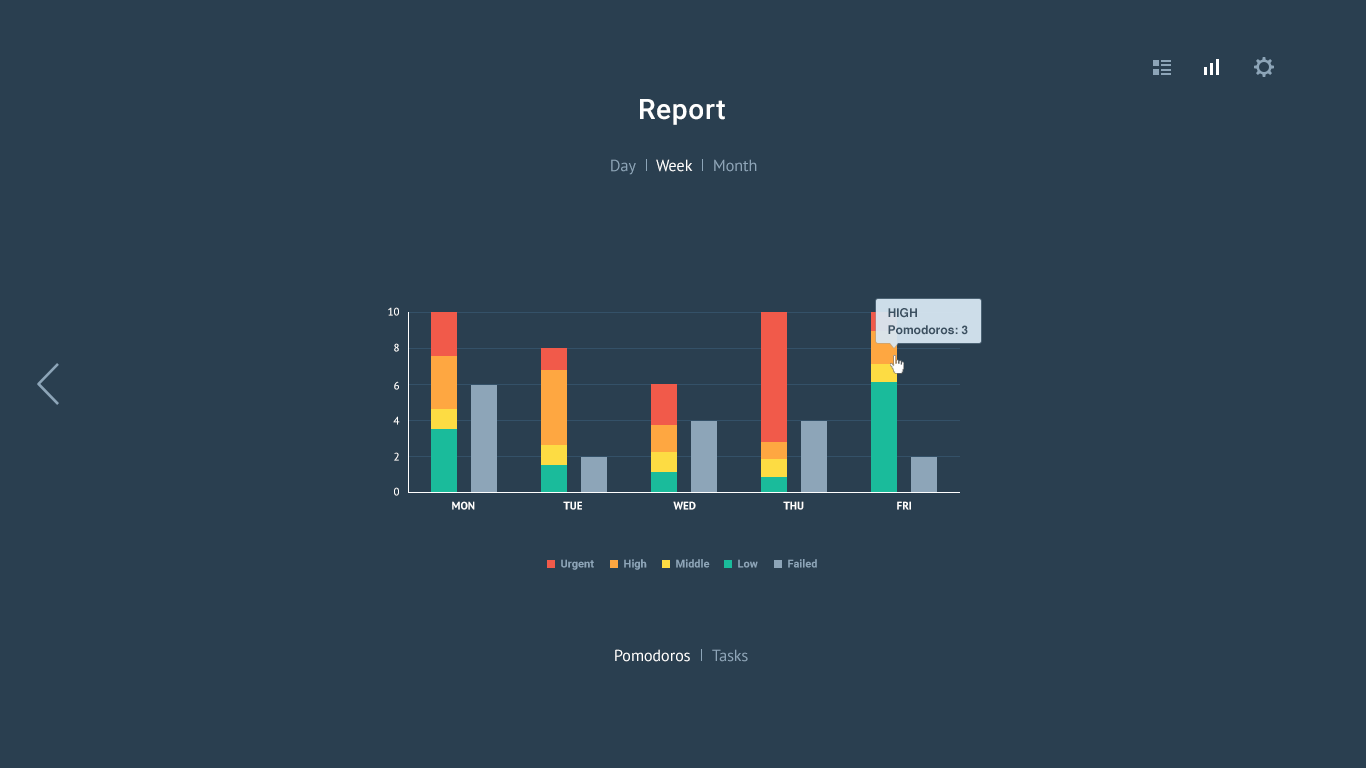
<style>
.page{position:relative;width:1366px;height:768px;background:#2a3f50}
.page>*{position:absolute;margin:0}
.t1{font:28px "Roboto-Medium";letter-spacing:0.025em;color:#ffffff}
.t2{font:16px "PTSans-Regular";color:#8da5b8}
.t3{font:16px "PTSans-Regular";color:#ffffff}
.t4{font:16px "PTSans-Regular";color:#8ea5b8}
.t5{font:11px "PTSans-Regular";color:#ffffff}
.t6{font:12px "Helvetica-Bold";color:#3c5162}
.t7{font:11px "PTSans-Bold";color:#ffffff}
.t8{font:11px "Roboto-Bold";color:#8da5b8}
</style>
<div class="page">
<p class="t1" style="left:640px;top:99px;width:85px;height:26px">Report</p>
<p class="t2" style="left:611px;top:159px;width:25px;height:16px">Day</p>
<p class="t3" style="left:656px;top:159px;width:37px;height:13px">Week</p>
<p class="t4" style="left:714px;top:159px;width:43px;height:13px">Month</p>
<p class="t5" style="left:388px;top:307px;width:11px;height:9px">10</p>
<p class="t6" style="left:888px;top:308px;width:29px;height:10px">HIGH</p>
<p class="t6" style="left:888px;top:325px;width:80px;height:10px">Pomodoros: 3</p>
<p class="t5" style="left:394px;top:343px;width:5px;height:9px">8</p>
<p class="t5" style="left:394px;top:381px;width:5px;height:9px">6</p>
<p class="t5" style="left:393px;top:416px;width:7px;height:9px">4</p>
<p class="t5" style="left:394px;top:452px;width:5px;height:9px">2</p>
<p class="t5" style="left:394px;top:487px;width:5px;height:9px">0</p>
<p class="t7" style="left:452px;top:501px;width:23px;height:9px">MON</p>
<p class="t7" style="left:563px;top:501px;width:19px;height:9px">TUE</p>
<p class="t7" style="left:673px;top:501px;width:23px;height:9px">WED</p>
<p class="t7" style="left:783px;top:501px;width:21px;height:9px">THU</p>
<p class="t7" style="left:897px;top:501px;width:14px;height:9px">FRI</p>
<p class="t8" style="left:561px;top:559px;width:33px;height:11px">Urgent</p>
<p class="t8" style="left:624px;top:559px;width:23px;height:11px">High</p>
<p class="t8" style="left:676px;top:559px;width:34px;height:9px">Middle</p>
<p class="t8" style="left:738px;top:559px;width:20px;height:9px">Low</p>
<p class="t8" style="left:788px;top:559px;width:29px;height:9px">Failed</p>
<p class="t3" style="left:615px;top:649px;width:75px;height:13px">Pomodoros</p>
<p class="t4" style="left:712px;top:649px;width:36px;height:13px">Tasks</p>
</div>
